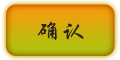
<style>
.page{position:relative;width:120px;height:60px}
.page>*{position:absolute;margin:0}
.t1{font:24px "STXingkai";letter-spacing:0.05em;color:#24231f}
</style>
<div class="page">
<p class="t1" style="left:37px;top:21px;width:47px;height:20px">确认</p>
</div>
